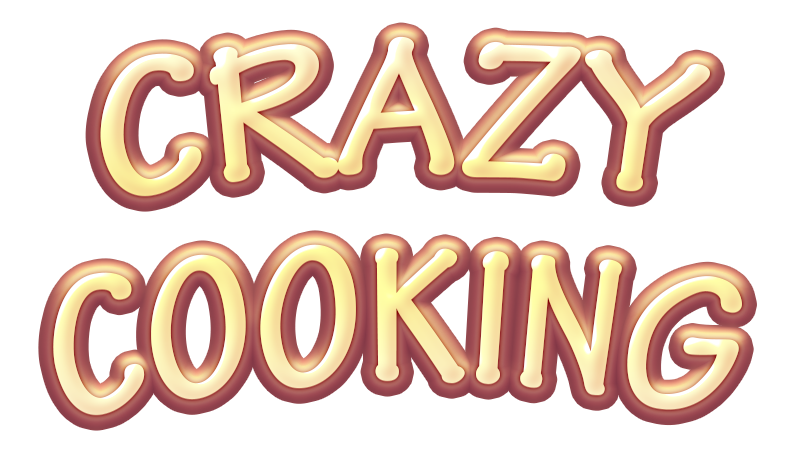
<style>
.page{position:relative;width:790px;height:457px;background:#ffffff}
.page>*{position:absolute;margin:0}
.t1{font:204.8px/206.8px "TektonPro-BoldCond"}
</style>
<div class="page">
<p class="t1" style="left:53px;top:36px;width:689px;height:379px;text-align:center">CRAZY<br>COOKING</p>
</div>
